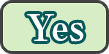
<style>
.page{position:relative;width:109px;height:54px;background:#d6edc6}
.page>*{position:absolute;margin:0}
.t1{font:36px "RyuminPro-ExBold";color:#ffffff}
</style>
<div class="page">
<p class="t1" style="left:27px;top:14px;width:57px;height:28px">Yes</p>
</div>
